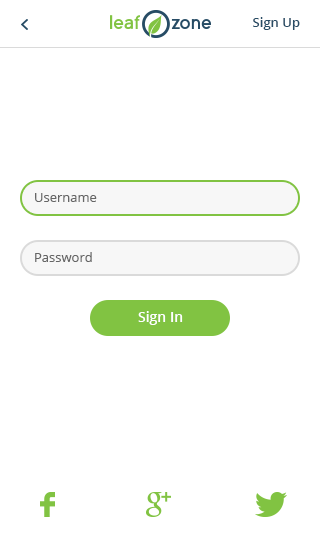
<style>
.page{position:relative;width:320px;height:552px;background:#ffffff}
.page>*{position:absolute;margin:0}
.t1{font:13px "OpenSans-Semibold";color:#274c65}
.t2{font:13px "OpenSans";color:#666666}
.t3{font:14px "OpenSans-Semibold";color:#ffffff}
</style>
<div class="page">
<p class="t1" style="left:253px;top:17px;width:47px;height:13px">Sign Up</p>
<p class="t2" style="left:35px;top:193px;width:62px;height:9px">Username</p>
<p class="t2" style="left:35px;top:252px;width:57px;height:10px">Password</p>
<p class="t3" style="left:138px;top:311px;width:45px;height:14px">Sign In</p>
</div>
